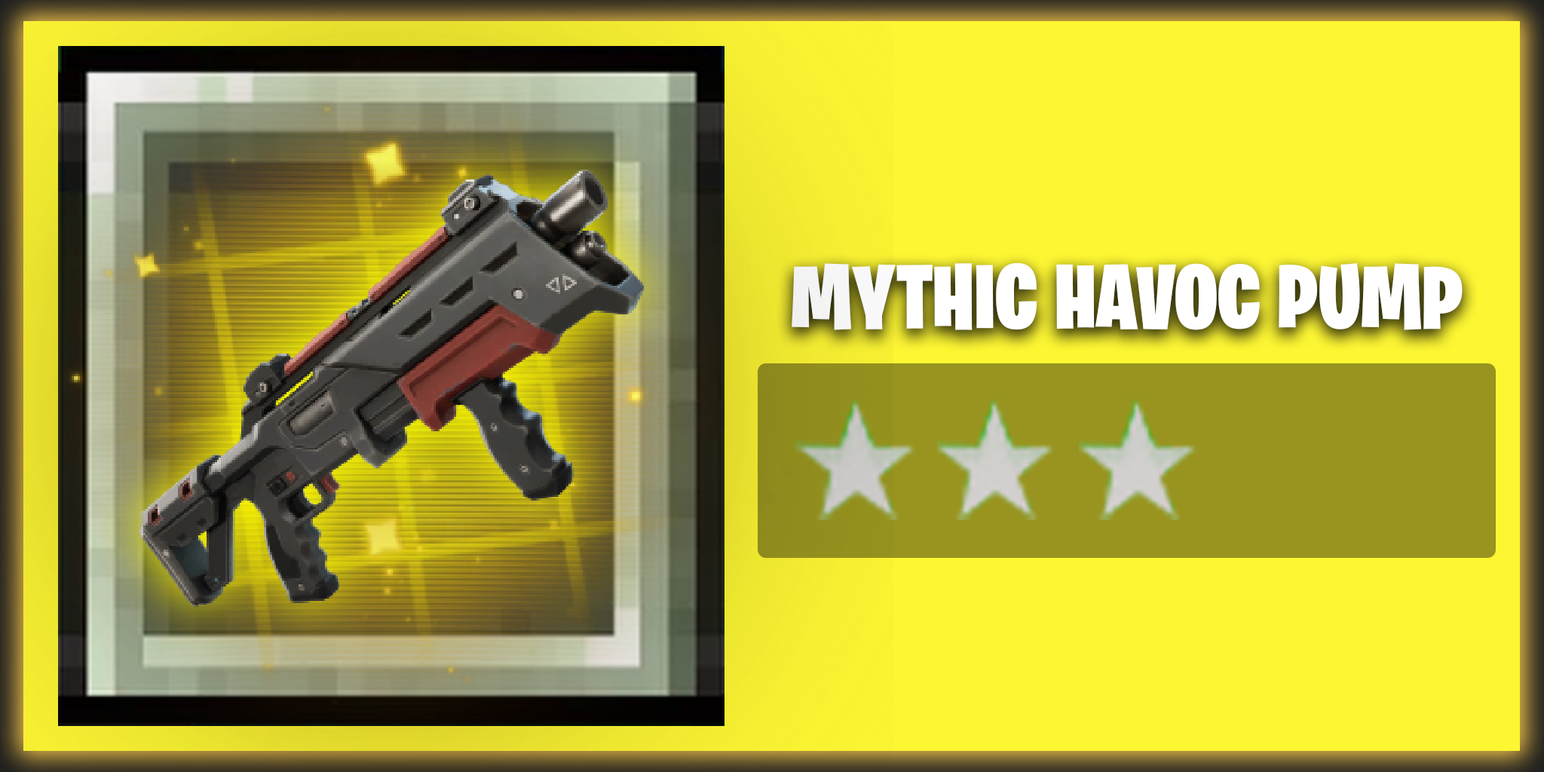
<style>
.page{position:relative;width:1544px;height:772px;background:#fdf633}
.page>*{position:absolute;margin:0}
.t1{font:90.5px "BurbankBigCondensed-Black";color:#ffffff}
</style>
<div class="page">
<p class="t1" style="left:792px;top:262px;width:671px;height:68px">MYTHIC HAVOC PUMP</p>
</div>
